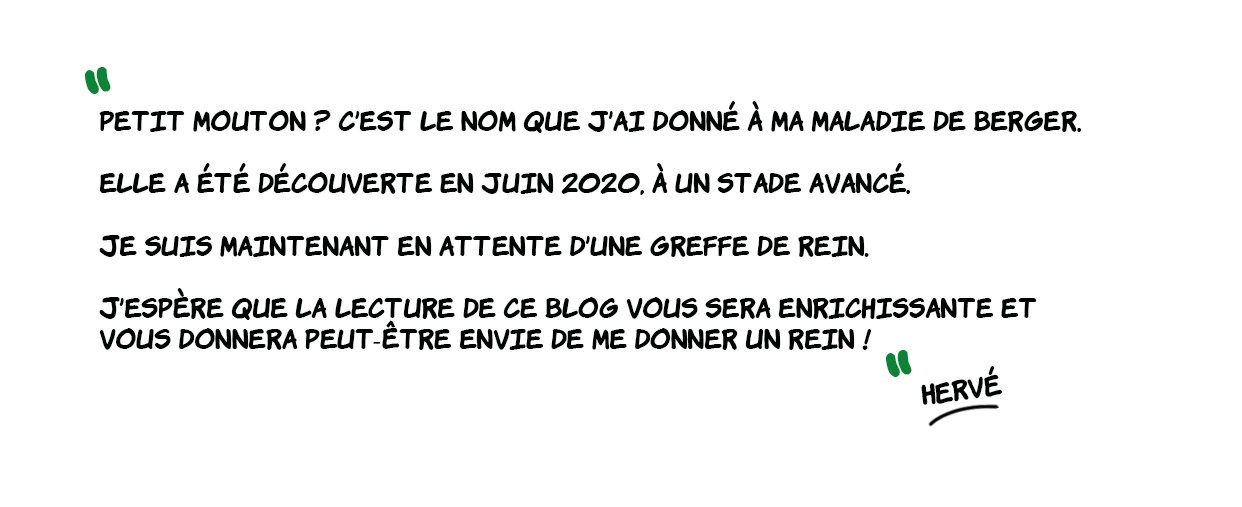
<style>
.page{position:relative;width:1242px;height:507px;background:#ffffff}
.page>*{position:absolute;margin:0}
.t1{font:80px "KomikaHand-Bold";color:#0b8436}
.t2{font:26px "KomikaHand-Bold";color:#000101}
.t3{font:26px "MyriadPro-Regular";color:#000101}
</style>
<div class="page">
<p class="t1" style="left:84px;top:67px;width:27px;height:27px">"</p>
<p class="t2" style="left:99px;top:101px;width:983px;height:249px">Petit Mouton ? C’est le nom que j’ai donné à ma maladie de Berger.<br><br>Elle a été découverte en juin 2020, à un stade avancé.<br><br>Je suis maintenant en attente d’une greffe de rein.<br><br>J’espère que la lecture de ce blog vous sera enrichissante et vous donnera peut<span class="t3">-</span>être envie de me donner un rein !</p>
<p class="t1" style="left:885px;top:350px;width:27px;height:27px">"</p>
<p class="t2" style="left:921px;top:366px;width:81px;height:39px;rotate:-7deg">Hervé</p>
</div>
